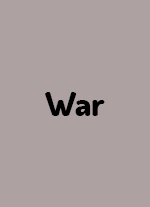
<style>
.page{position:relative;width:150px;height:207px;background:#aea1a1}
.page>*{position:absolute;margin:0}
.t1{font:34px "Dosis-ExtraBold";color:#000000}
</style>
<div class="page">
<p class="t1" style="left:45px;top:92px;width:60px;height:24px">War</p>
</div>
